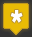
<style>
.page{position:relative;width:32px;height:37px;background:#e9bb05}
.page>*{position:absolute;margin:0}
.t1{font:38.6px "MicrostyleBoldExtendedATT";color:#ffffff;scale:0.9 1}
</style>
<div class="page">
<p class="t1" style="left:10px;top:10px;width:13px;height:13px">*</p>
</div>
